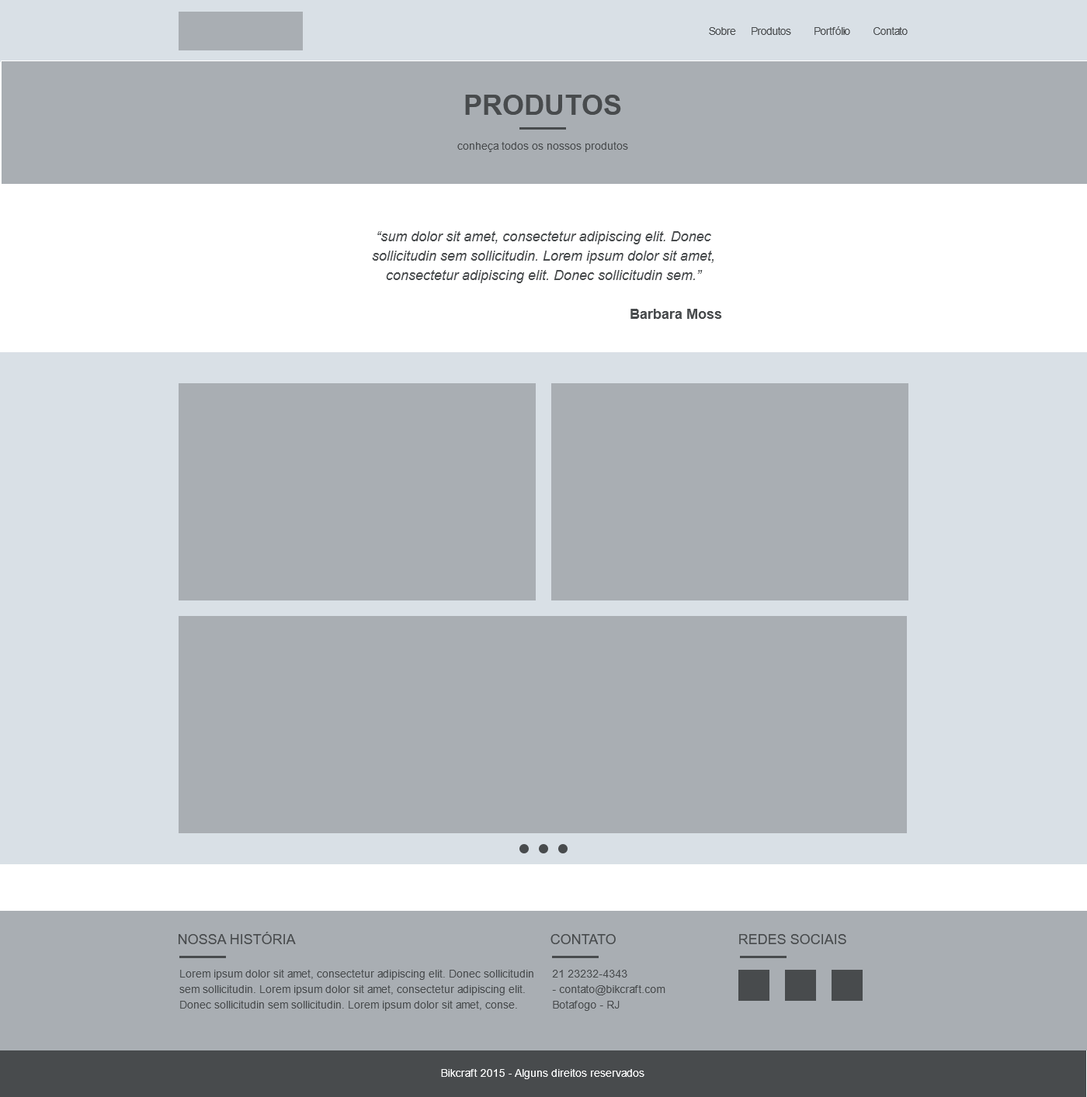
<style>
.page{position:relative;width:1087px;height:1097px;background:#a9aeb3}
.page>*{position:absolute;margin:0}
.t1{font:10.9px "ArialMT";letter-spacing:-0.05em;color:#484b4d}
.t2{font:27.9px "Arial-BoldMT";color:#484b4d;text-transform:uppercase}
.t3{font:10.9px "ArialMT";color:#484b4d}
.t4{font:14px/19.4px "Arial-ItalicMT";color:#484b4d}
.t5{font:14px/19.4px "Arial-BoldMT";color:#484b4d}
.t6{font:14px "ArialMT";color:#484b4d;text-transform:uppercase}
.t7{font:10.9px/15.5px "ArialMT";color:#484b4d}
.t8{font:10.9px "ArialMT";color:#feffff}
</style>
<div class="page">
<p class="t1" style="left:709px;top:26px;width:198px;height:9px">Sobre      Produtos         Portfólio         Contato</p>
<p class="t2" style="left:465px;top:95px;width:156px;height:20px">PRODUTOS</p>
<p class="t3" style="left:457px;top:142px;width:171px;height:10px">conheça todos os nossos produtos</p>
<p class="t4" style="left:372px;top:231px;width:350px;height:88px;text-align:center">“sum dolor sit amet, consectetur adipiscing elit. Donec sollicitudin sem sollicitudin. Lorem ipsum dolor sit amet, consectetur adipiscing elit. Donec sollicitudin sem.”<br><br><span class="t5">Barbara Moss</span></p>
<p class="t6" style="left:179px;top:932px;width:117px;height:13px">NOSSA HISTÓRIA</p>
<p class="t6" style="left:550px;top:934px;width:65px;height:11px">CONTATO</p>
<p class="t6" style="left:739px;top:934px;width:107px;height:11px">REDES SOCIAIS</p>
<p class="t7" style="left:179px;top:970px;width:354px;height:41px">Lorem ipsum dolor sit amet, consectetur adipiscing elit. Donec sollicitudin sem sollicitudin. Lorem ipsum dolor sit amet, consectetur adipiscing elit. Donec sollicitudin sem sollicitudin. Lorem ipsum dolor sit amet, conse.</p>
<p class="t7" style="left:552px;top:970px;width:113px;height:41px">21 23232-4343<br>- contato@bikcraft.com<br>Botafogo - RJ</p>
<p class="t8" style="left:441px;top:1069px;width:203px;height:11px">Bikcraft 2015 - Alguns direitos reservados</p>
</div>
